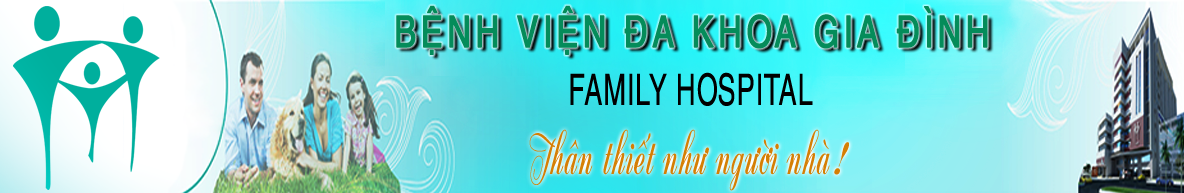
<style>
.page{position:relative;width:1184px;height:193px}
.page>*{position:absolute;margin:0}
.t1{font:43.5px "UTM-Helve";letter-spacing:0.08em;color:#048c5a;font-weight:bold;scale:0.75 1}
.t2{font:43.5px "UTM-Helve";color:#000000;scale:0.62 1}
.t3{font:75.7px "UTM-Zirkon";color:#d57f04;scale:0.62 1}
.t4{font:56.4px "UTM-Zirkon";color:#d57f04;scale:0.62 1}
.t5{font:49.1px "UTM-Zirkon";color:#d57f04;scale:0.88 1}
</style>
<div class="page">
<p class="t1" style="left:396px;top:5px;width:592px;height:50px">BỆNH VIỆN ĐA KHOA GIA ĐÌNH</p>
<p class="t2" style="left:570px;top:72px;width:243px;height:34px">FAMILY HOSPITAL</p>
<p class="t3" style="left:529px;top:129px;width:320px;height:62px"><span class="t4">T</span>hân thiết như người nhà<span class="t5">!</span></p>
</div>
